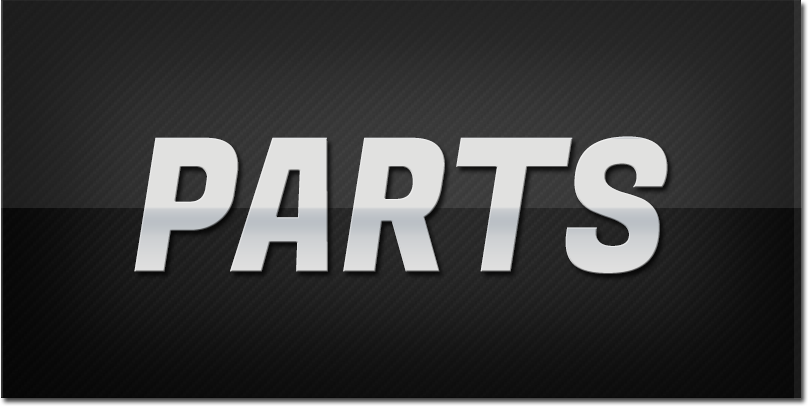
<style>
.page{position:relative;width:808px;height:406px}
.page>*{position:absolute;margin:0}
.t1{font:185.2px "FugazOne-Regular";color:#dfdfdf;scale:0.89 1}
</style>
<div class="page">
<p class="t1" style="left:134px;top:136px;width:534px;height:138px">PARTS</p>
</div>
